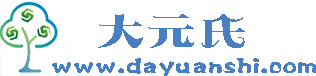
<style>
.page{position:relative;width:316px;height:76px;background:#ffffff}
.page>*{position:absolute;margin:0}
.t1{font:48px "FZXRJW--GB1-0";letter-spacing:0.06em;color:#487ec2}
.t2{font:20px "FZPWJW--GB1-0";letter-spacing:0.06em;color:#487ec2}
</style>
<div class="page">
<p class="t1" style="left:98px;top:14px;width:147px;height:34px">大元氏</p>
<p class="t2" style="left:52px;top:58px;width:264px;height:18px">www.dayuanshi.com</p>
</div>
